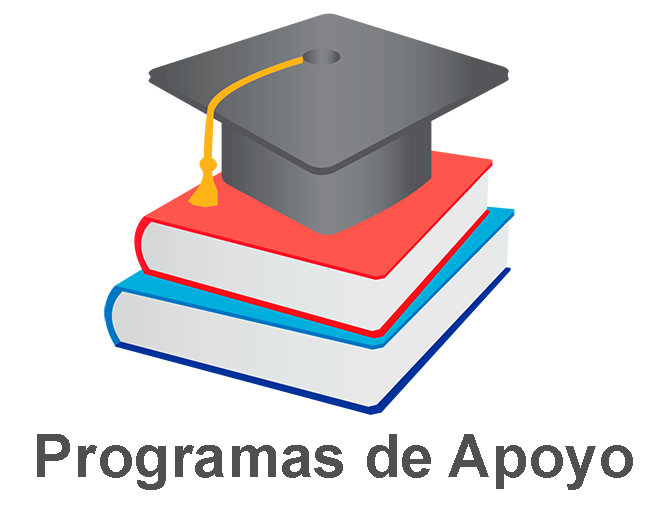
<style>
.page{position:relative;width:670px;height:510px;background:#ffffff}
.page>*{position:absolute;margin:0}
.t1{font:60px "Arial-BoldMT";color:#505050}
</style>
<div class="page">
<p class="t1" style="left:37px;top:434px;width:596px;height:56px">Programas de Apoyo</p>
</div>
